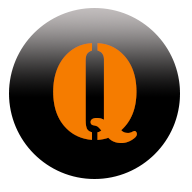
<style>
.page{position:relative;width:192px;height:192px;background:#ffffff}
.page>*{position:absolute;margin:0}
.t1{font:140px "Stencil";color:#f57c00}
</style>
<div class="page">
<p class="t1" style="left:53px;top:43px;width:84px;height:100px">Q</p>
</div>
